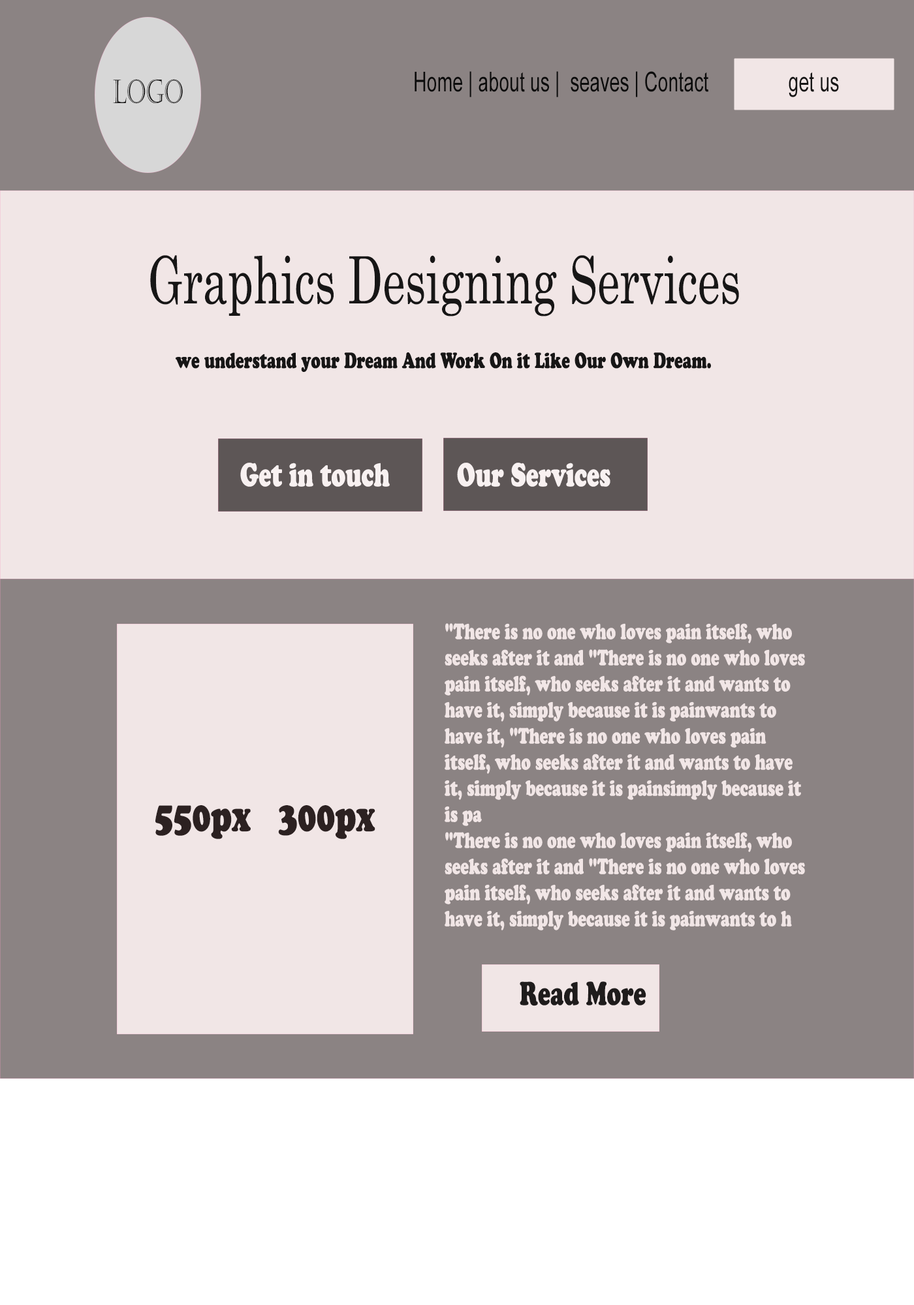
<style>
.page{position:relative;width:914px;height:1305px;background:#f1e6e6}
.page>*{position:absolute;margin:0}
.t1{font:27.2px "ArialMT";color:#0c0c0c;scale:0.69 1}
.t2{font:27.2px "ArialMT";color:#171616;scale:0.69 1}
.t3{font:32.6px "Castellar";color:#171616;scale:0.69 1}
.t4{font:65.3px "Century";color:#171616;scale:0.69 1}
.t5{font:21.8px "CooperBlackStd";color:#171616;scale:0.69 1}
.t6{font:32.6px "CooperBlackStd";color:#f8f1f1;scale:0.69 1}
.t7{font:21.8px "CooperBlackStd";color:#f1e6e6;scale:0.69 1}
.t8{font:43.5px "CooperBlackStd";color:#2c2121;scale:0.69 1}
.t9{font:32.6px "CooperBlackStd";color:#1f1c1c;scale:0.69 1}
</style>
<div class="page">
<p class="t1" style="left:414px;top:71px;width:294px;height:26px">Home | about us |  seaves | Contact</p>
<p class="t2" style="left:788px;top:72px;width:51px;height:25px">get us</p>
<p class="t3" style="left:113px;top:79px;width:70px;height:25px">Logo</p>
<p class="t4" style="left:150px;top:255px;width:589px;height:62px">Graphics Designing Services</p>
<p class="t5" style="left:176px;top:352px;width:535px;height:20px">we understand your Dream And Work On it Like Our Own Dream.</p>
<p class="t6" style="left:240px;top:463px;width:150px;height:24px">Get in touch</p>
<p class="t6" style="left:457px;top:463px;width:153px;height:24px">Our Services</p>
<p class="t7" style="left:444px;top:623px;width:361px;height:308px">"There is no one who loves pain itself, who seeks after it and "There is no one who loves pain itself, who seeks after it and wants to have it, simply because it is painwants to have it, "There is no one who loves pain itself, who seeks after it and wants to have it, simply because it is painsimply because it is pa<br>"There is no one who loves pain itself, who seeks after it and "There is no one who loves pain itself, who seeks after it and wants to have it, simply because it is painwants to h</p>
<p class="t8" style="left:155px;top:805px;width:220px;height:34px">550px   300px</p>
<p class="t9" style="left:519px;top:981px;width:127px;height:25px">Read More</p>
</div>
